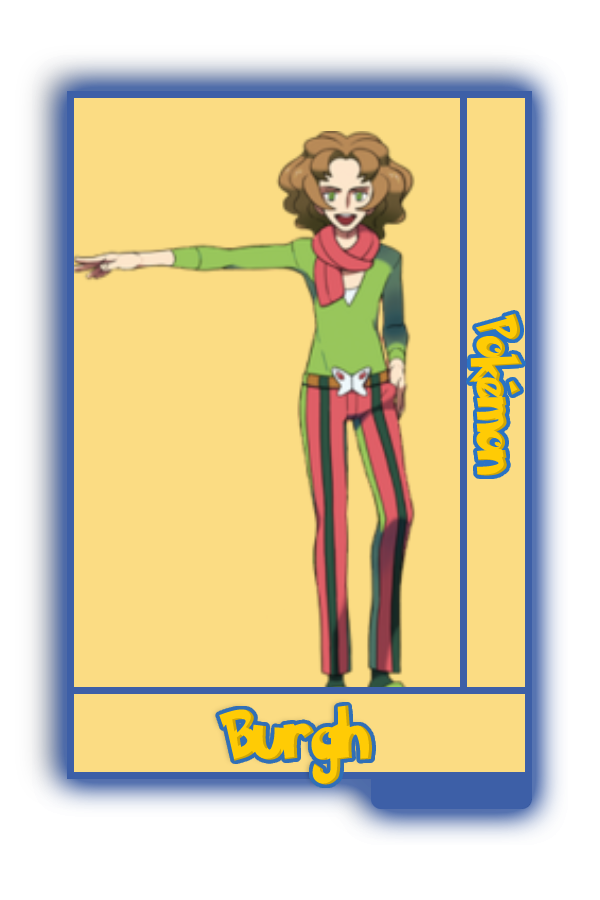
<style>
.page{position:relative;width:600px;height:900px;background:#fbdc83}
.page>*{position:absolute;margin:0}
.t1{font:48.8px "PokemonSolidNormal";color:#ffcb05;scale:0.8 1}
.t2{font:56.6px "PokemonSolidNormal";color:#ffcb05;scale:0.92 1}
</style>
<div class="page">
<p class="t1" style="left:469px;top:313px;width:54px;height:163px;rotate:90deg">Pokémon</p>
<p class="t2" style="left:219px;top:705px;width:154px;height:80px">Burgh</p>
</div>
